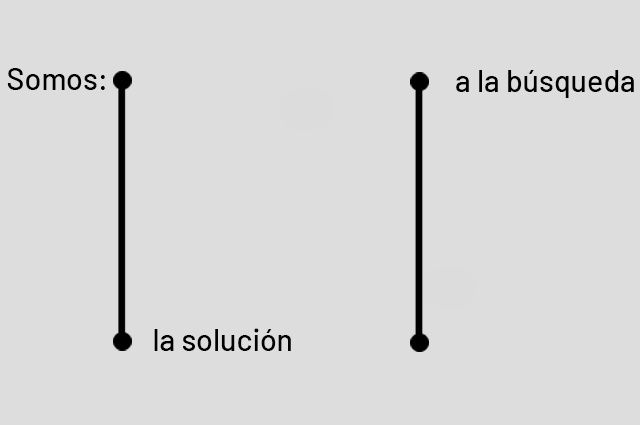
<style>
.page{position:relative;width:640px;height:425px;background:#dddddd}
.page>*{position:absolute;margin:0}
.t1{font:30.3px "Barlow-Medium";color:#000000}
</style>
<div class="page">
<p class="t1" style="left:7px;top:68px;width:98px;height:22px">Somos:</p>
<p class="t1" style="left:456px;top:70px;width:178px;height:28px">a la búsqueda</p>
<p class="t1" style="left:154px;top:328px;width:137px;height:23px">la solución</p>
</div>
